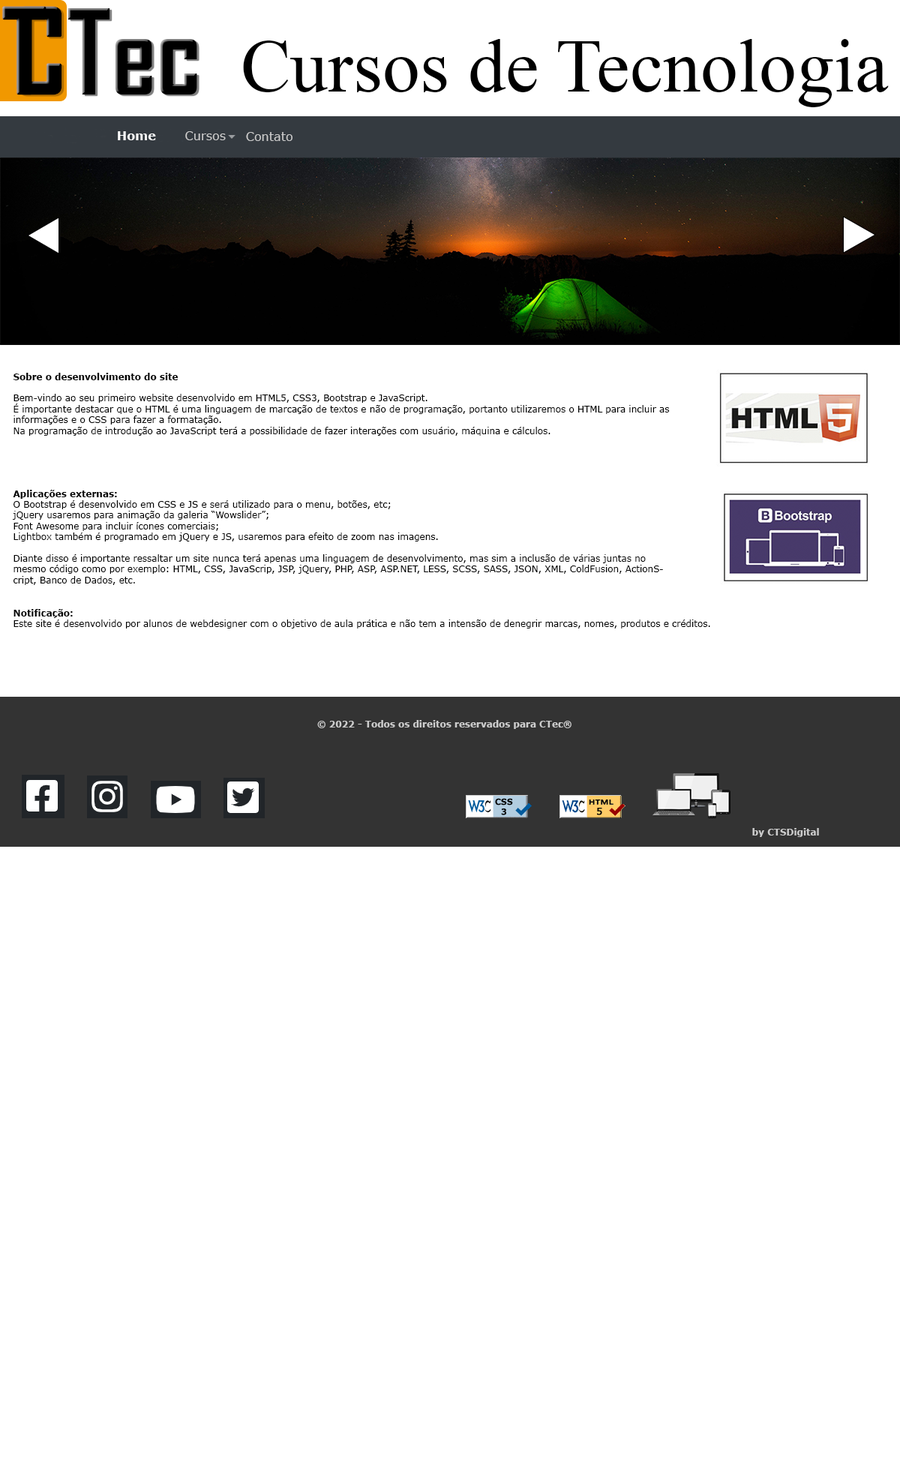
<style>
.page{position:relative;width:900px;height:1482px;background:#ffffff}
.page>*{position:absolute;margin:0}
.t1{font:75.1px "TimesNewRomanPSMT";color:#000000}
.t2{font:12px "Verdana-Bold";color:#ffffff}
.t3{font:12px "Verdana";color:#cccccc}
.t4{font:9px "Verdana";color:#000000}
.t5{font:9px "Verdana-Bold";color:#000000}
.t6{font:9px "Verdana-Bold";color:#cccccc}
</style>
<div class="page">
<p class="t1" style="left:243px;top:39px;width:646px;height:68px">Cursos de Tecnologia</p>
<p class="t2" style="left:118px;top:131px;width:38px;height:9px">Home</p>
<p class="t3" style="left:185px;top:131px;width:41px;height:9px">Cursos</p>
<p class="t3" style="left:246px;top:132px;width:46px;height:9px">Contato</p>
<p class="t4" style="left:13px;top:373px;width:657px;height:63px"><span class="t5">Sobre o desenvolvimento do site<br></span><br>Bem-vindo ao seu primeiro website desenvolvido em HTML5, CSS3, Bootstrap e JavaScript.<br>É importante destacar que o HTML é uma linguagem de marcação de textos e não de programação, portanto utilizaremos o HTML para incluir as informações e o CSS para fazer a formatação.<br>Na programação de introdução ao JavaScript terá a possibilidade de fazer interações com usuário, máquina e cálculos.</p>
<p class="t4" style="left:13px;top:490px;width:650px;height:95px"><span class="t5">Aplicações externas:<br></span>O Bootstrap é desenvolvido em CSS e JS e será utilizado para o menu, botões, etc;<br>jQuery usaremos para animação da galeria “Wowslider”;<br>Font Awesome para incluir ícones comerciais;<br>Lightbox também é programado em jQuery e JS, usaremos para efeito de zoom nas imagens.<br><br>Diante disso é importante ressaltar um site nunca terá apenas uma linguagem de desenvolvimento, mas sim a inclusão de várias juntas no mesmo código como por exemplo: HTML, CSS, JavaScrip, JSP, jQuery, PHP, ASP, ASP.NET, LESS, SCSS, SASS, JSON, XML, ColdFusion, ActionScript, Banco de Dados, etc.</p>
<p class="t4" style="left:13px;top:609px;width:697px;height:19px"><span class="t5">Notificação:<br></span>Este site é desenvolvido por alunos de webdesigner com o objetivo de aula prática e não tem a intensão de denegrir marcas, nomes, produtos e créditos.</p>
<p class="t6" style="left:317px;top:720px;width:254px;height:9px">© 2022 - Todos os direitos reservados para CTec®</p>
<p class="t6" style="left:752px;top:828px;width:67px;height:9px">by CTSDigital</p>
</div>
